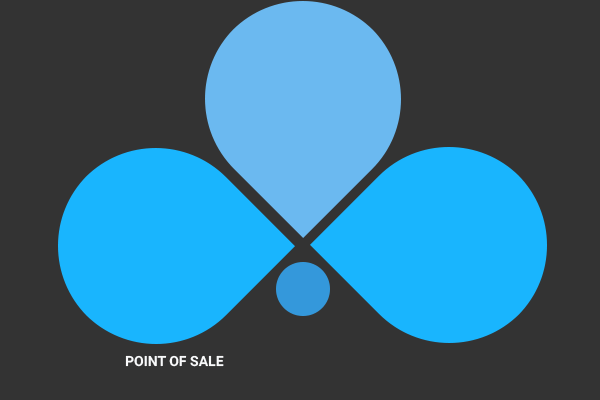
<style>
.page{position:relative;width:600px;height:400px;background:#333333}
.page>*{position:absolute;margin:0}
.t1{font:14px "Roboto-Bold";color:#f9fafb}
</style>
<div class="page">
<p class="t1" style="left:125px;top:355px;width:99px;height:12px">POINT OF SALE</p>
</div>
